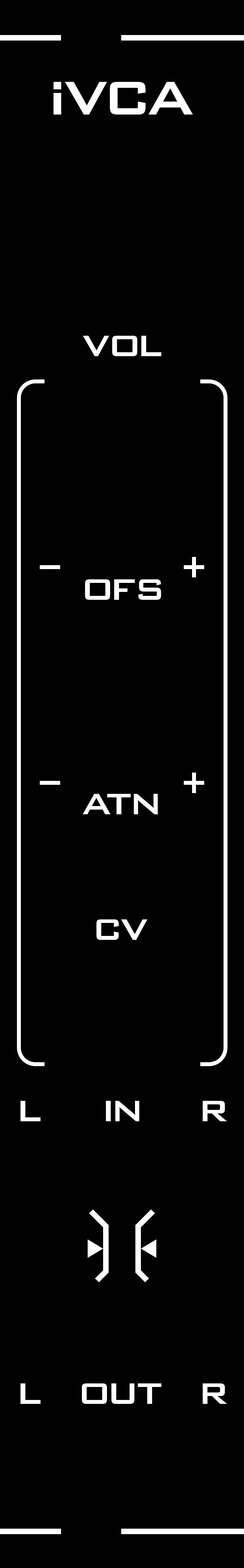
<style>
.page{position:relative;width:244px;height:1568px;background:#000000}
.page>*{position:absolute;margin:0}
.t1{font:63px "BankGothicBT-Medium";letter-spacing:-0.08em;color:#ffffff}
.t2{font:39.4px "BankGothicBT-Medium";letter-spacing:-0.06em;color:#ffffff}
.t3{font:39.4px "BankGothicBT-Medium";letter-spacing:-0.14em;color:#ffffff}
.t4{font:39.4px "BankGothicBT-Medium";letter-spacing:-0.065em;color:#ffffff}
</style>
<div class="page">
<p class="t1" style="left:54px;top:82px;width:139px;height:33px">IVCA</p>
<p class="t2" style="left:83px;top:336px;width:78px;height:20px">V<span class="t3">O</span>L</p>
<p class="t3" style="left:85px;top:579px;width:76px;height:21px">O<span class="t2">F</span>S</p>
<p class="t2" style="left:83px;top:794px;width:75px;height:20px">A<span class="t4">T</span>N</p>
<p class="t2" style="left:96px;top:919px;width:52px;height:21px">CV</p>
<p class="t3" style="left:20px;top:1101px;width:21px;height:20px">L</p>
<p class="t3" style="left:106px;top:1101px;width:33px;height:20px">IN</p>
<p class="t3" style="left:203px;top:1101px;width:24px;height:20px">R</p>
<p class="t3" style="left:20px;top:1383px;width:21px;height:21px">L</p>
<p class="t3" style="left:82px;top:1383px;width:79px;height:21px">O<span class="t2">U</span>T</p>
<p class="t3" style="left:203px;top:1383px;width:24px;height:21px">R</p>
</div>
